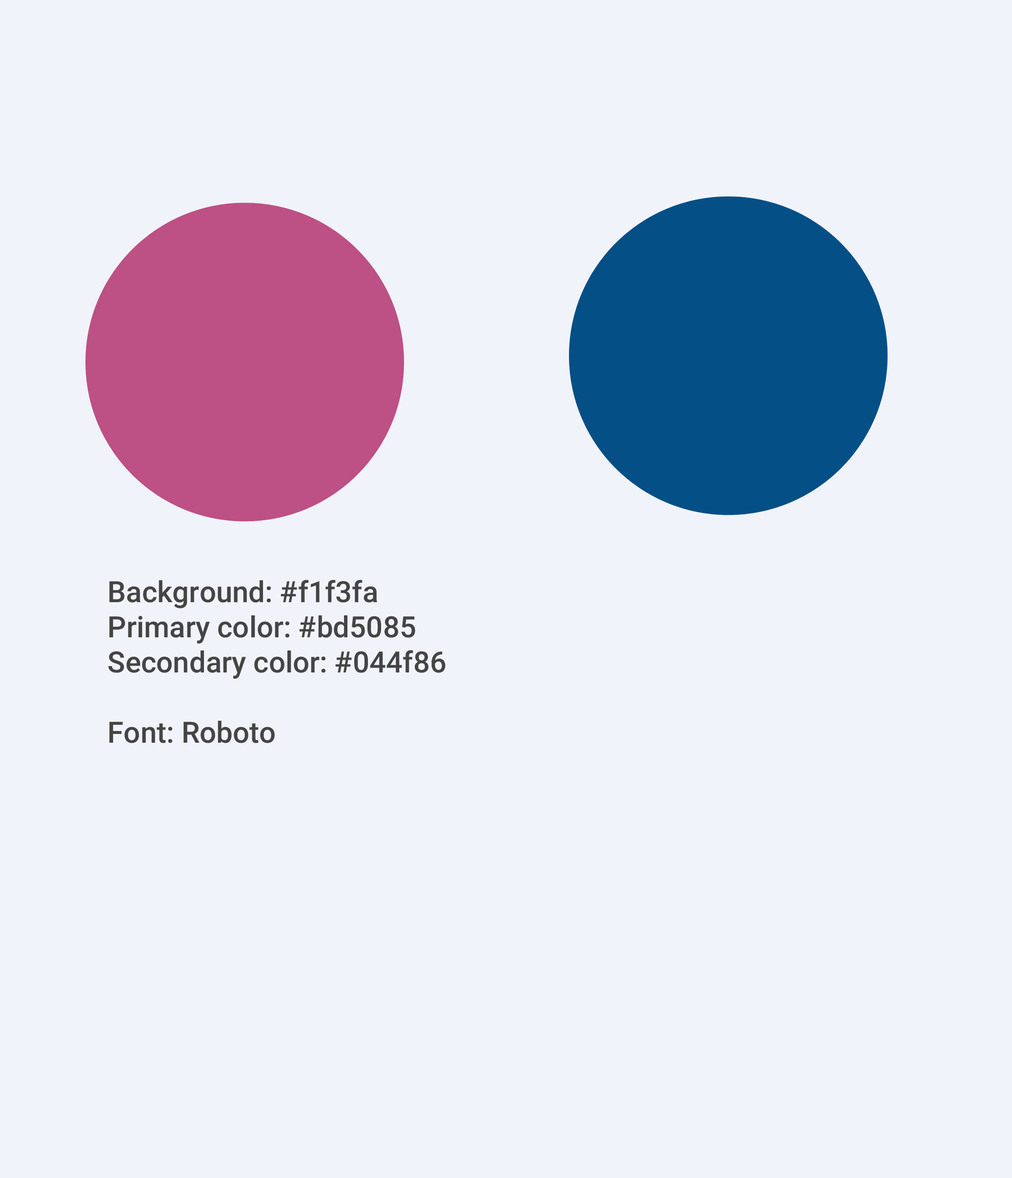
<style>
.page{position:relative;width:1012px;height:1178px;background:#f1f3fa}
.page>*{position:absolute;margin:0}
.t1{font:29.3px "Roboto-Medium";color:#444444}
</style>
<div class="page">
<p class="t1" style="left:108px;top:580px;width:338px;height:163px">Background: #f1f3fa<br>Primary color: #bd5085<br>Secondary color: #044f86<br><br>Font: Roboto</p>
</div>
